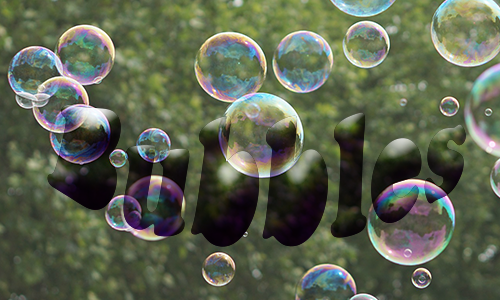
<style>
.page{position:relative;width:500px;height:300px}
.page>*{position:absolute;margin:0}
.t1{font:100px "CooperBlack";letter-spacing:0.01em;font-style:italic}
</style>
<div class="page">
<p class="t1" style="left:47px;top:105px;width:419px;height:142px">Bubbles</p>
</div>
